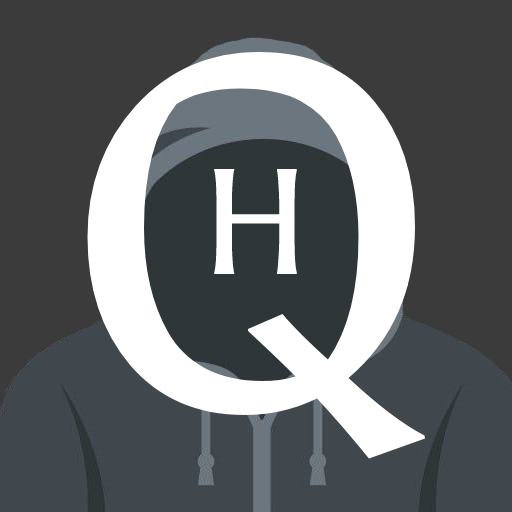
<style>
.page{position:relative;width:512px;height:512px;background:#3b3b3b}
.page>*{position:absolute;margin:0}
.t1{font:500px "Asul-Regular";color:#ffffff}
.t2{font:150px "Asul-Regular";color:#ffffff}
</style>
<div class="page">
<p class="t1" style="left:87px;top:52px;width:338px;height:407px">Q</p>
<p class="t2" style="left:214px;top:169px;width:83px;height:105px">H</p>
</div>
